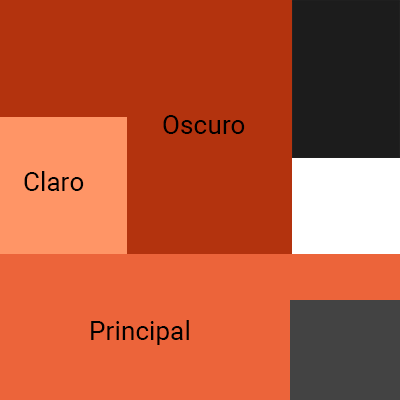
<style>
.page{position:relative;width:400px;height:400px;background:#b3330e}
.page>*{position:absolute;margin:0}
.t1{font:26px "Roboto-Regular";color:#000000}
</style>
<div class="page">
<p class="t1" style="left:163px;top:115px;width:82px;height:19px">Oscuro</p>
<p class="t1" style="left:24px;top:171px;width:60px;height:20px">Claro</p>
<p class="t1" style="left:91px;top:320px;width:98px;height:25px">Principal</p>
</div>
